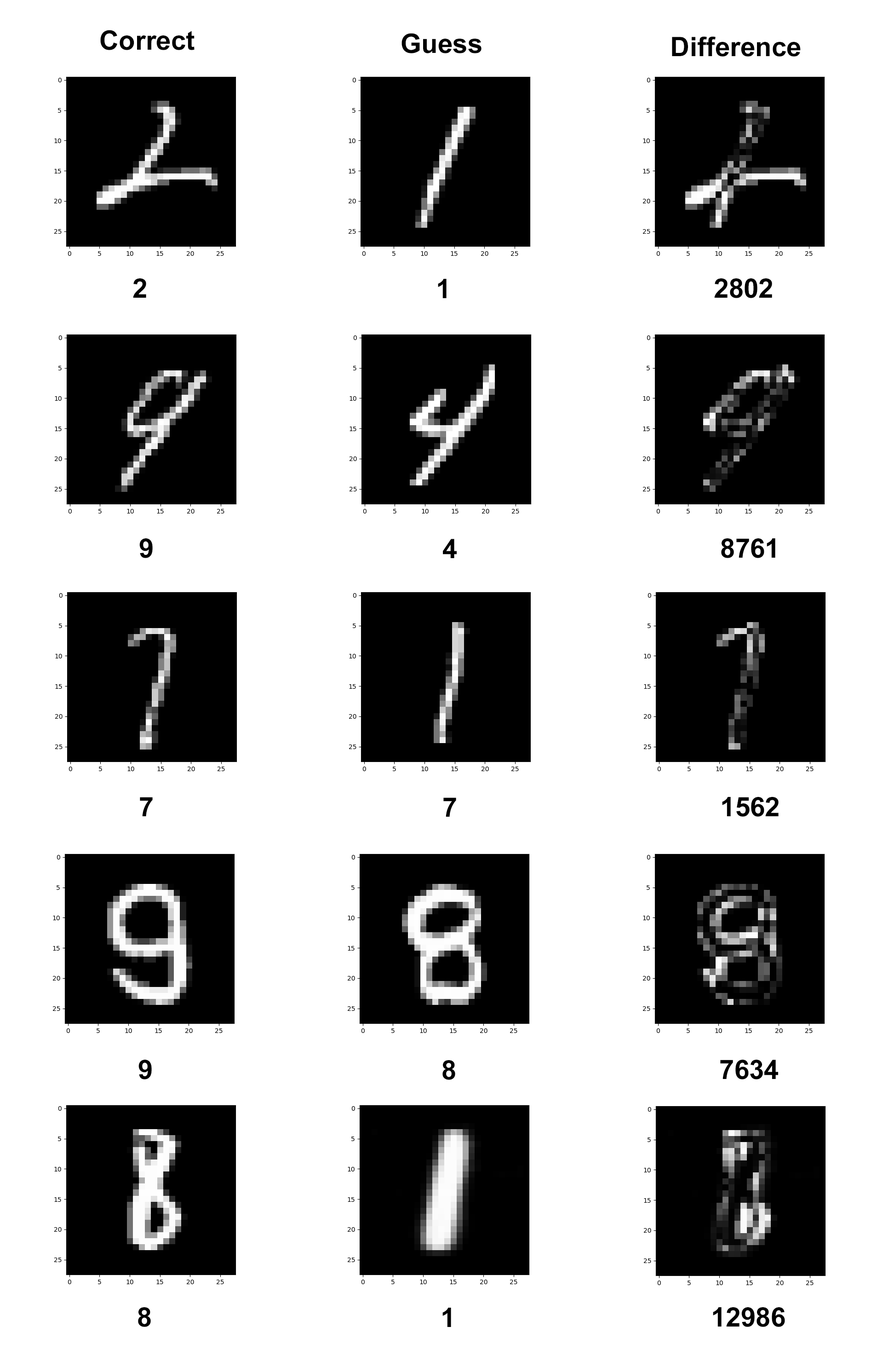
<style>
.page{position:relative;width:883px;height:1350px;background:#ffffff}
.page>*{position:absolute;margin:0}
.t1{font:46px "Arial-BoldMT";color:#000000}
</style>
<div class="page">
<p class="t1" style="left:100px;top:30px;width:95px;height:20px">Correct</p>
<p class="t1" style="left:402px;top:33px;width:80px;height:20px">Guess</p>
<p class="t1" style="left:672px;top:36px;width:129px;height:21px">Difference</p>
<p class="t1" style="left:133px;top:278px;width:13px;height:20px">2</p>
<p class="t1" style="left:438px;top:279px;width:9px;height:19px">1</p>
<p class="t1" style="left:715px;top:278px;width:57px;height:20px">2802</p>
<p class="t1" style="left:139px;top:538px;width:14px;height:20px">9</p>
<p class="t1" style="left:443px;top:539px;width:14px;height:19px">4</p>
<p class="t1" style="left:721px;top:538px;width:55px;height:20px">8761</p>
<p class="t1" style="left:140px;top:797px;width:13px;height:19px">7</p>
<p class="t1" style="left:444px;top:797px;width:12px;height:20px">7</p>
<p class="t1" style="left:722px;top:797px;width:57px;height:20px">1562</p>
<p class="t1" style="left:138px;top:1060px;width:14px;height:19px">9</p>
<p class="t1" style="left:443px;top:1060px;width:12px;height:20px">8</p>
<p class="t1" style="left:720px;top:1060px;width:58px;height:19px">7634</p>
<p class="t1" style="left:138px;top:1307px;width:13px;height:20px">8</p>
<p class="t1" style="left:443px;top:1308px;width:8px;height:19px">1</p>
<p class="t1" style="left:713px;top:1307px;width:72px;height:20px">12986</p>
</div>
